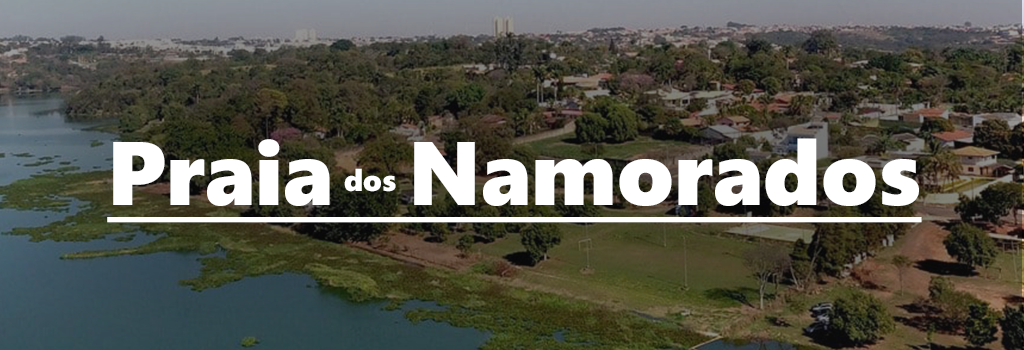
<style>
.page{position:relative;width:1024px;height:350px}
.page>*{position:absolute;margin:0}
.t1{font:90px "SegoeUIBlack";color:#ffffff;text-decoration:underline}
.t2{font:30px "SegoeUIBlack";color:#ffffff}
</style>
<div class="page">
<p class="t1" style="left:107px;top:138px;width:815px;height:85px">Praia   Namorados</p>
<p class="t2" style="left:344px;top:168px;width:52px;height:24px">dos</p>
</div>
